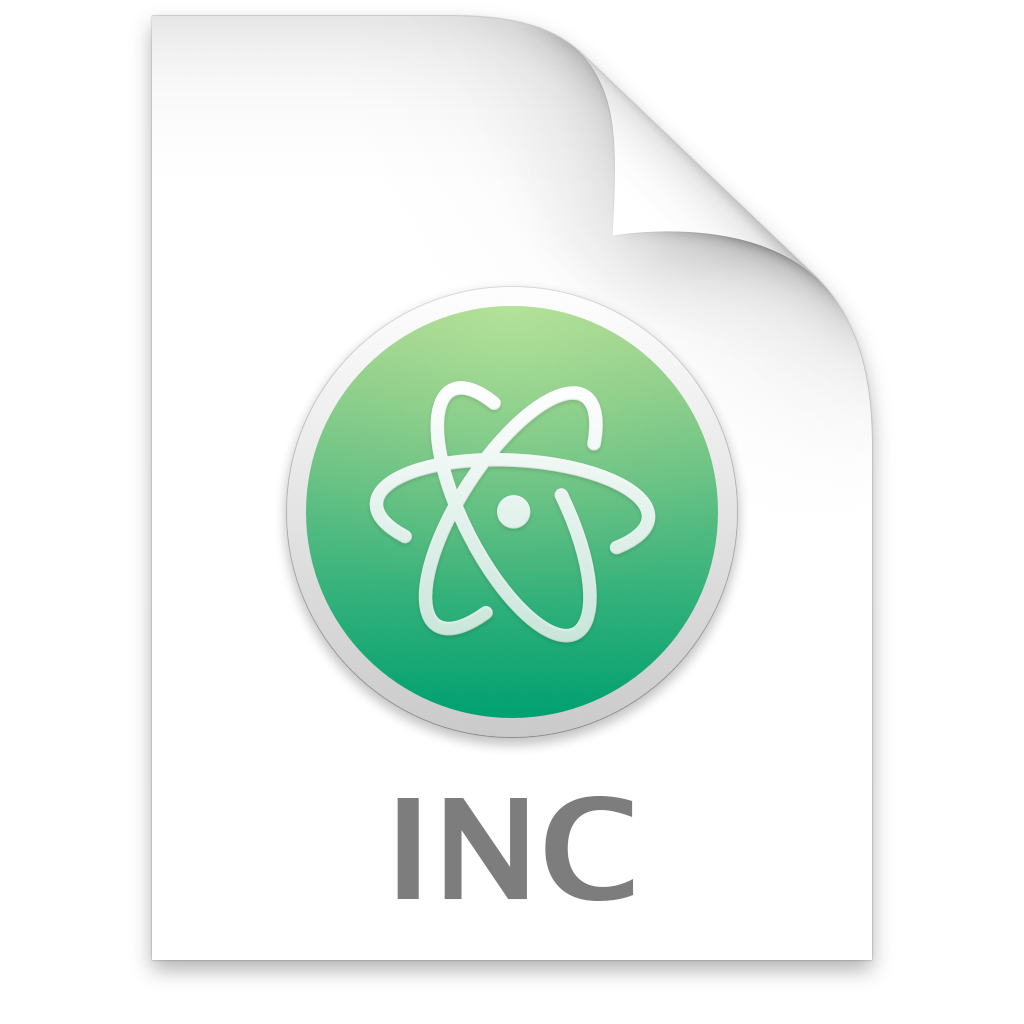
<style>
.page{position:relative;width:1024px;height:1024px;background:#ffffff}
.page>*{position:absolute;margin:0}
.t1{font:140px "LucidaGrande-Bold";color:#7d7d7d}
</style>
<div class="page">
<p class="t1" style="left:397px;top:796px;width:237px;height:105px">INC</p>
</div>
